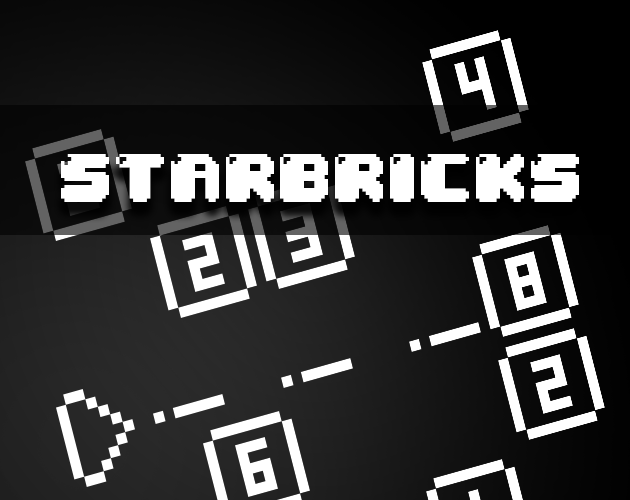
<style>
.page{position:relative;width:630px;height:500px}
.page>*{position:absolute;margin:0}
.t1{font:58.3px "04b30";color:#ffffff}
</style>
<div class="page">
<p class="t1" style="left:61px;top:154px;width:518px;height:48px">STARBRICKS</p>
</div>
